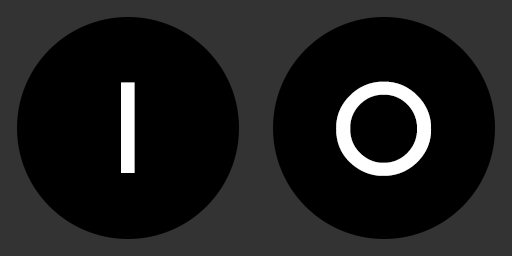
<style>
.page{position:relative;width:512px;height:256px;background:#000000}
.page>*{position:absolute;margin:0}
.t1{font:120px "Futura-Medium";color:#ffffff}
</style>
<div class="page">
<p class="t1" style="left:121px;top:82px;width:14px;height:91px">I</p>
<p class="t1" style="left:336px;top:81px;width:96px;height:95px">OUT</p>
</div>
